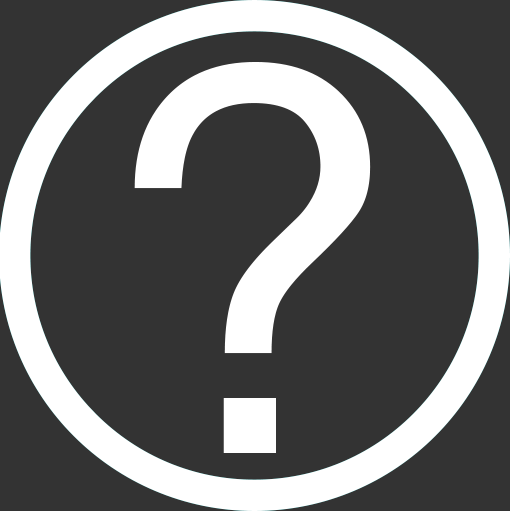
<style>
.page{position:relative;width:510px;height:511px;background:#333333}
.page>*{position:absolute;margin:0}
.t1{font:537.5px "Helvetica";color:#ffffff}
</style>
<div class="page">
<p class="t1" style="left:134px;top:62px;width:237px;height:391px">?</p>
</div>
